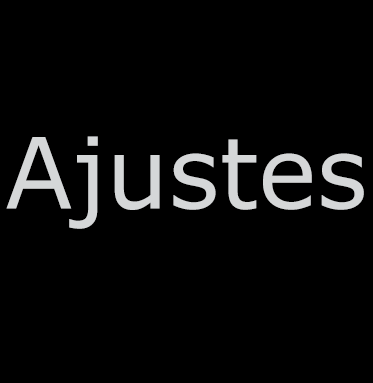
<style>
.page{position:relative;width:373px;height:383px;background:#000000}
.page>*{position:absolute;margin:0}
.t1{font:98.1px "Verdana";color:#d5d7d8}
</style>
<div class="page">
<p class="t1" style="left:6px;top:136px;width:358px;height:93px">Ajustes</p>
</div>
